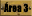
<style>
.page{position:relative;width:32px;height:16px}
.page>*{position:absolute;margin:0}
.t1{font:10px "Impact";letter-spacing:0.02em;color:#000000;scale:0.9 1}
</style>
<div class="page">
<p class="t1" style="left:4px;top:2px;width:24px;height:11px">Área 3</p>
</div>
